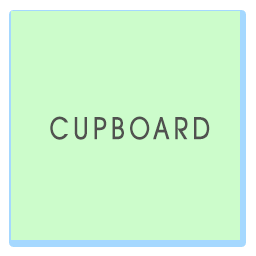
<style>
.page{position:relative;width:256px;height:256px;background:#ccfccb}
.page>*{position:absolute;margin:0}
.t1{font:30px "AvantGarde-Medium";letter-spacing:0.15em;color:#50514f;text-transform:uppercase;scale:0.84 1}
</style>
<div class="page">
<p class="t1" style="left:50px;top:116px;width:160px;height:24px">CUPBOARD</p>
</div>
